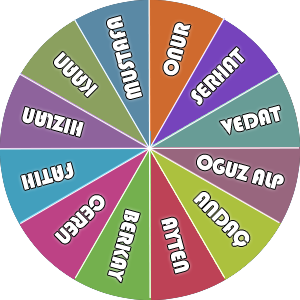
<style>
.page{position:relative;width:300px;height:300px;background:#ffffff}
.page>*{position:absolute;margin:0}
.t1{font:22.2px "Bauhaus93";letter-spacing:-0.025em;color:#ffffff}
</style>
<div class="page">
<p class="t1" style="left:107px;top:16px;width:36px;height:83px;rotate:-105deg">MUSTAFA</p>
<p class="t1" style="left:163px;top:22px;width:28px;height:54px;rotate:-75deg">ONUR</p>
<p class="t1" style="left:54px;top:51px;width:44px;height:47px;rotate:-135deg">KAAN</p>
<p class="t1" style="left:191px;top:47px;width:54px;height:59px;rotate:-45deg">SERHAT</p>
<p class="t1" style="left:22px;top:107px;width:62px;height:30px;rotate:-165deg">HIZLAN</p>
<p class="t1" style="left:219px;top:105px;width:62px;height:30px;rotate:-15deg">VEDAT</p>
<p class="t1" style="left:197px;top:154px;width:87px;height:35px;rotate:15deg">OGUZ ALP</p>
<p class="t1" style="left:21px;top:162px;width:53px;height:28px;rotate:165deg">FATIH</p>
<p class="t1" style="left:54px;top:195px;width:51px;height:49px;rotate:135deg">CEREN</p>
<p class="t1" style="left:193px;top:192px;width:57px;height:54px;rotate:45deg">ANDAÇ</p>
<p class="t1" style="left:108px;top:209px;width:32px;height:74px;rotate:105deg">BERKAY</p>
<p class="t1" style="left:161px;top:217px;width:28px;height:57px;rotate:75deg">AYTEN</p>
</div>
